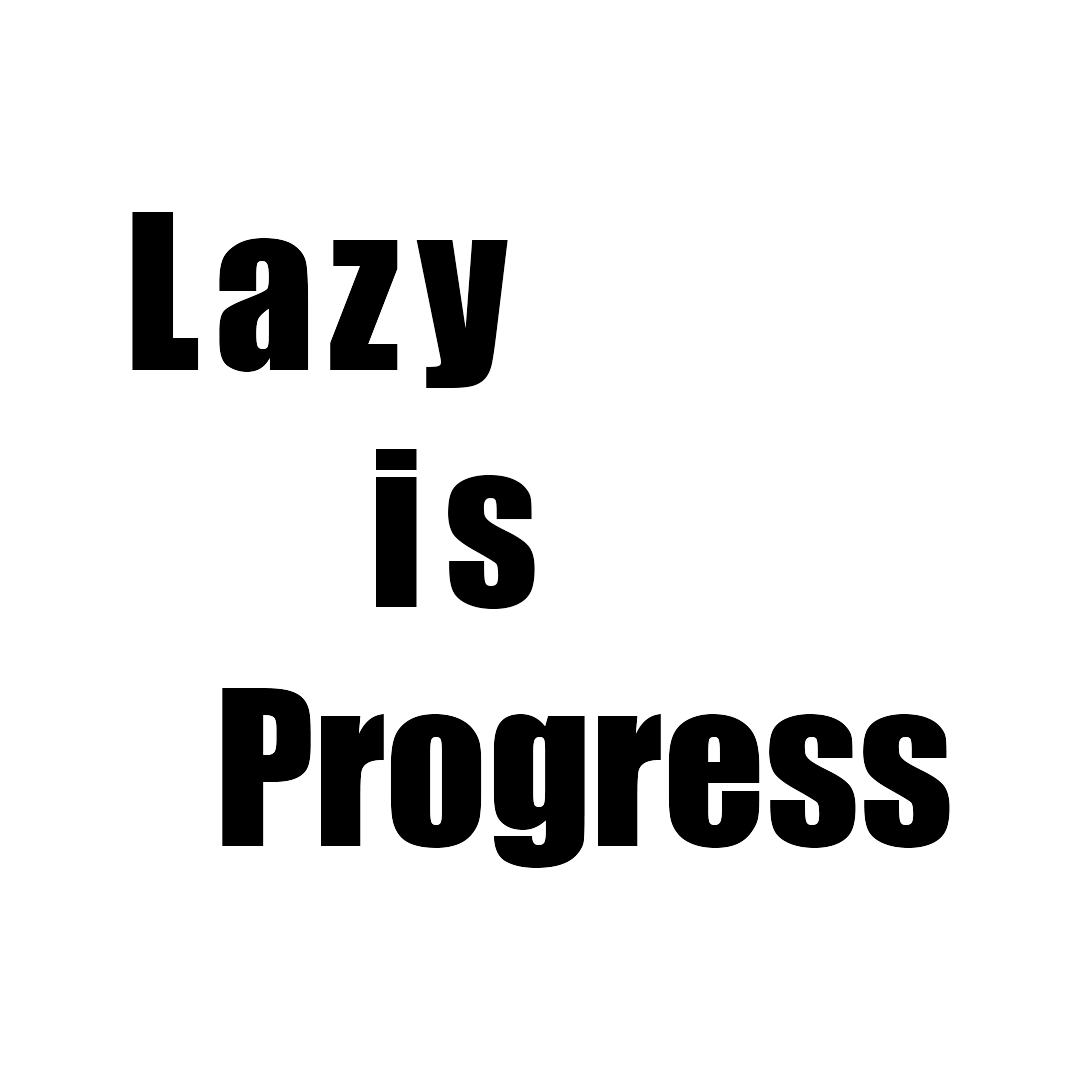
<style>
.page{position:relative;width:1080px;height:1080px;background:#ffffff}
.page>*{position:absolute;margin:0}
.t1{font:200px "Impact";color:#000000}
</style>
<div class="page">
<p class="t1" style="left:132px;top:212px;width:67px;height:158px">L</p>
<p class="t1" style="left:219px;top:238px;width:90px;height:134px">a</p>
<p class="t1" style="left:330px;top:240px;width:68px;height:130px">z</p>
<p class="t1" style="left:416px;top:240px;width:92px;height:148px">y</p>
<p class="t1" style="left:376px;top:449px;width:41px;height:158px">i</p>
<p class="t1" style="left:448px;top:475px;width:87px;height:134px">s</p>
<p class="t1" style="left:222px;top:688px;width:728px;height:180px">Progress</p>
</div>
